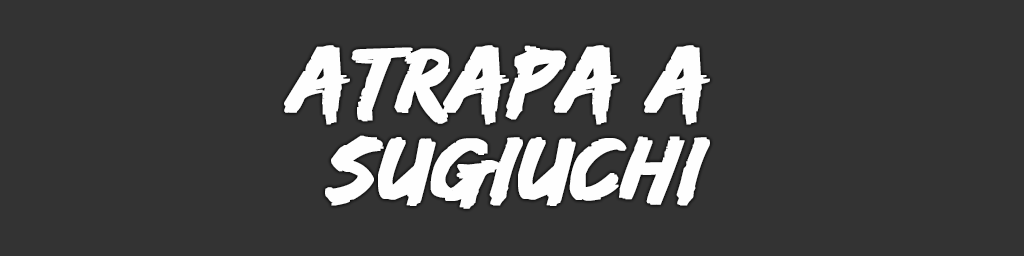
<style>
.page{position:relative;width:1024px;height:256px;background:#333333}
.page>*{position:absolute;margin:0}
.t1{font:94px/88px "EdoSZ";color:#fefefe;font-weight:bold;font-style:italic;scale:1.04 1}
</style>
<div class="page">
<p class="t1" style="left:284px;top:45px;width:426px;height:164px;text-align:center">atrapa a <br>sugiuchi</p>
</div>
